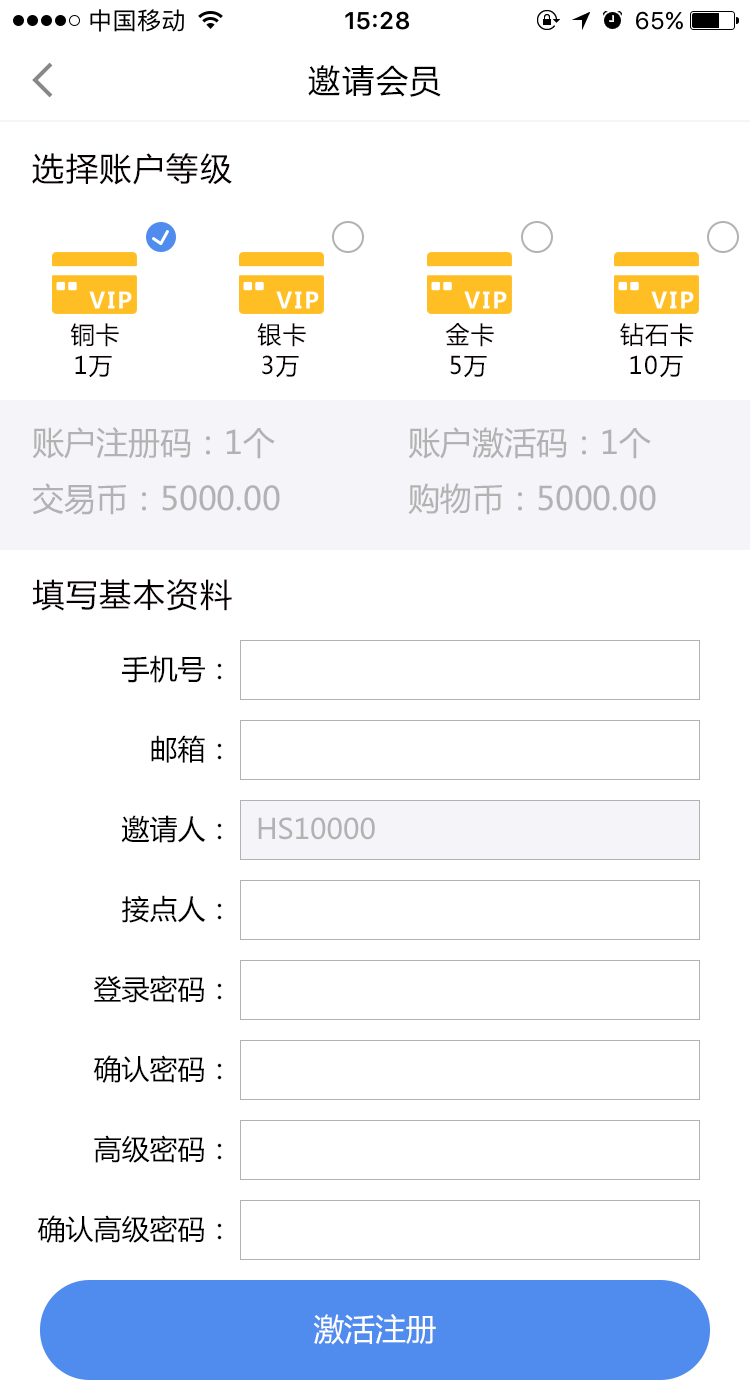
<style>
.page{position:relative;width:750px;height:1400px;background:#ffffff}
.page>*{position:absolute;margin:0}
.t1{font:32px "MicrosoftYaHei";letter-spacing:0.05em;color:#000000}
.t2{font:24px "MicrosoftYaHei";letter-spacing:0.05em;color:#000000}
.t3{font:32px "MicrosoftYaHei";color:#b2b2b2}
.t4{font:28px "MicrosoftYaHei";color:#000000}
.t5{font:28px "MicrosoftYaHei";color:#b1b1b1}
.t6{font:30.7px "MicrosoftYaHei";color:#ffffff}
</style>
<div class="page">
<p class="t1" style="left:308px;top:65px;width:133px;height:32px">邀请会员</p>
<p class="t1" style="left:32px;top:153px;width:200px;height:32px">选择账户等级</p>
<p class="t2" style="left:70px;top:323px;width:49px;height:24px">铜卡</p>
<p class="t2" style="left:257px;top:323px;width:49px;height:24px">银卡</p>
<p class="t2" style="left:445px;top:323px;width:49px;height:24px">金卡</p>
<p class="t2" style="left:620px;top:323px;width:74px;height:24px">钻石卡</p>
<p class="t2" style="left:75px;top:355px;width:37px;height:23px">1万</p>
<p class="t2" style="left:262px;top:355px;width:37px;height:23px">3万</p>
<p class="t2" style="left:450px;top:355px;width:37px;height:23px">5万</p>
<p class="t2" style="left:630px;top:355px;width:53px;height:23px">10万</p>
<p class="t3" style="left:32px;top:427px;width:248px;height:88px">账户注册码：1个<br>交易币：5000.00</p>
<p class="t3" style="left:408px;top:427px;width:248px;height:88px">账户激活码：1个<br>购物币：5000.00</p>
<p class="t1" style="left:32px;top:579px;width:200px;height:32px">填写基本资料</p>
<p class="t4" style="left:122px;top:655px;width:100px;height:28px">手机号：</p>
<p class="t4" style="left:151px;top:735px;width:71px;height:28px">邮箱：</p>
<p class="t4" style="left:121px;top:815px;width:101px;height:28px">邀请人：</p>
<p class="t5" style="left:258px;top:817px;width:117px;height:23px">HS10000</p>
<p class="t4" style="left:122px;top:895px;width:100px;height:28px">接点人：</p>
<p class="t4" style="left:93px;top:975px;width:129px;height:28px">登录密码：</p>
<p class="t4" style="left:93px;top:1055px;width:129px;height:28px">确认密码：</p>
<p class="t4" style="left:94px;top:1135px;width:128px;height:28px">高级密码：</p>
<p class="t4" style="left:37px;top:1215px;width:185px;height:28px">确认高级密码：</p>
<p class="t6" style="left:313px;top:1314px;width:123px;height:31px">激活注册</p>
</div>
